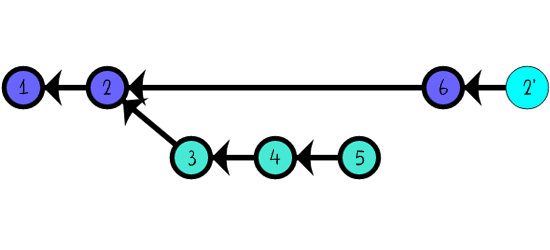
<style>
.page{position:relative;width:550px;height:250px;background:#ffffff}
.page>*{position:absolute;margin:0}
.t1{font:25px "DKCrayonCrumble";color:#000000}
.t2{font:25px "DKCrayonCrumble"}
</style>
<div class="page">
<p class="t1" style="left:19px;top:78px;width:10px;height:17px">1</p>
<p class="t1" style="left:523px;top:78px;width:13px;height:17px">‘2</p>
<p class="t1" style="left:103px;top:79px;width:8px;height:16px">2</p>
<p class="t1" style="left:439px;top:79px;width:9px;height:16px">6</p>
<p class="t1" style="left:188px;top:150px;width:8px;height:16px">3</p>
<p class="t2" style="left:270px;top:149px;width:11px;height:16px">4</p>
<p class="t1" style="left:356px;top:150px;width:9px;height:16px">5</p>
</div>
